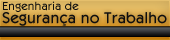
<style>
.page{position:relative;width:170px;height:40px}
.page>*{position:absolute;margin:0}
.t1{font:12px "KabobRegular";color:#0e0e0f}
.t2{font:16px "KabobRegular";color:#0e0e0f}
</style>
<div class="page">
<p class="t1" style="left:3px;top:1px;width:76px;height:11px">Engenharia de</p>
<p class="t2" style="left:2px;top:12px;width:165px;height:14px">Segurança no Trabalho</p>
</div>
